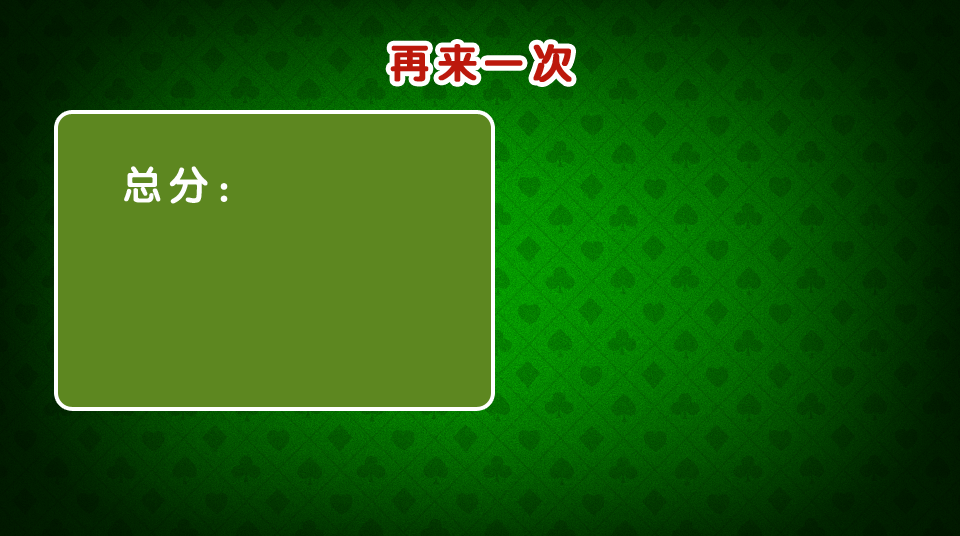
<style>
.page{position:relative;width:960px;height:536px;background:#5d8720}
.page>*{position:absolute;margin:0}
.t1{font:40px "JCuYuan";letter-spacing:0.15em;color:#bc180c;font-weight:bold}
.t2{font:40px "JCuYuan";letter-spacing:0.15em;color:#fefefe}
</style>
<div class="page">
<p class="t1" style="left:390px;top:44px;width:182px;height:38px">再来一次</p>
<p class="t2" style="left:124px;top:166px;width:104px;height:38px">总分：</p>
</div>
